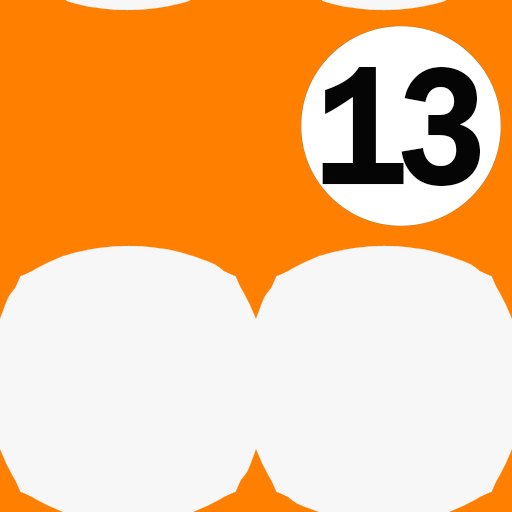
<style>
.page{position:relative;width:512px;height:512px;background:#f7f7f7}
.page>*{position:absolute;margin:0}
.t1{font:172.5px "FranklinGothic-Demi";letter-spacing:-0.05em;color:#060505;scale:0.87 1}
</style>
<div class="page">
<p class="t1" style="left:322px;top:67px;width:158px;height:119px">13</p>
</div>
